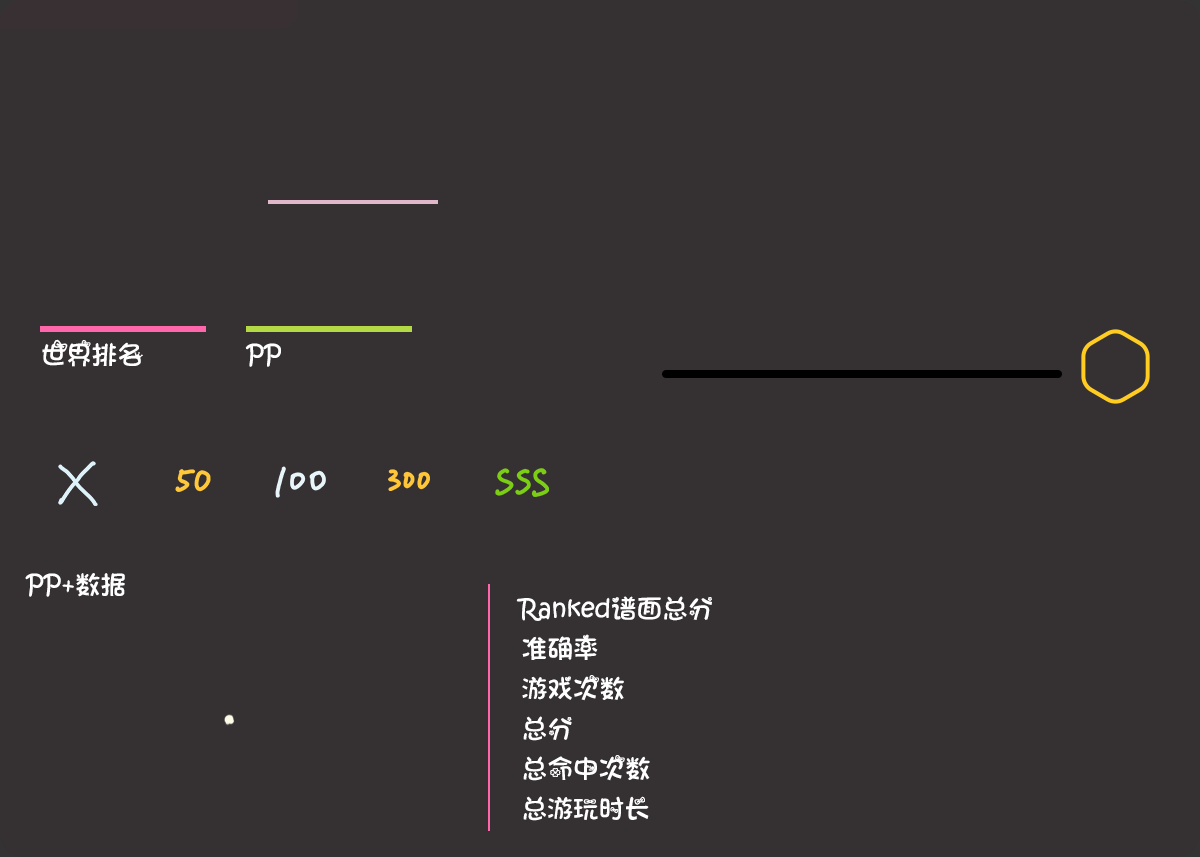
<style>
.page{position:relative;width:1200px;height:857px;background:#353133}
.page>*{position:absolute;margin:0}
.t1{font:25px "STHeitiSC-Light";color:#ffffff}
</style>
<div class="page">
<p class="t1" style="left:42px;top:339px;width:101px;height:28px">世界排名</p>
<p class="t1" style="left:245px;top:343px;width:36px;height:24px">PP</p>
<p class="t1" style="left:25px;top:573px;width:100px;height:24px">PP+数据</p>
<p class="t1" style="left:516px;top:596px;width:196px;height:25px">Ranked谱面总分</p>
<p class="t1" style="left:522px;top:634px;width:76px;height:26px">准确率</p>
<p class="t1" style="left:522px;top:675px;width:102px;height:26px">游戏次数</p>
<p class="t1" style="left:523px;top:716px;width:49px;height:25px">总分</p>
<p class="t1" style="left:523px;top:755px;width:127px;height:26px">总命中次数</p>
<p class="t1" style="left:523px;top:796px;width:126px;height:25px">总游玩时长</p>
</div>
